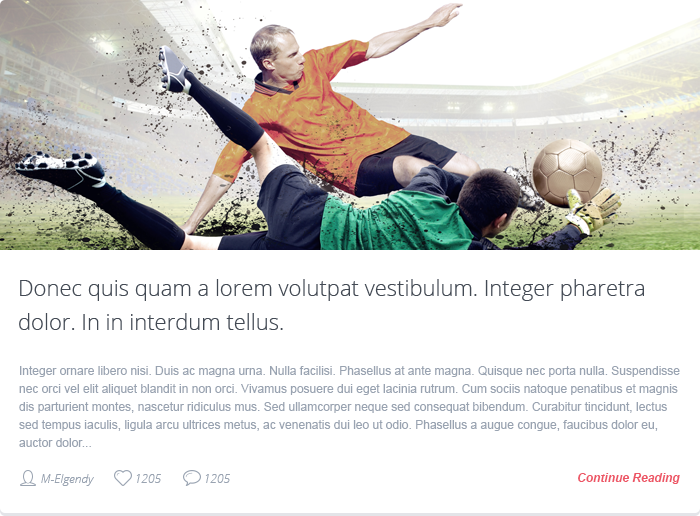
<style>
.page{position:relative;width:700px;height:516px;background:#ffffff}
.page>*{position:absolute;margin:0}
.t1{font:22px/34px "OpenSans-Light";color:#434a54}
.t2{font:12px/18px "ArialMT";color:#99a3b1}
.t3{font:12px "Arial-BoldItalicMT";color:#ed5565}
.t4{font:12px "OpenSansLight-Italic";color:#99a3b1}
</style>
<div class="page">
<p class="t1" style="left:19px;top:279px;width:625px;height:51px">Donec quis quam a lorem volutpat vestibulum. Integer pharetra dolor. In in interdum tellus.</p>
<p class="t2" style="left:19px;top:366px;width:661px;height:81px">Integer ornare libero nisi. Duis ac magna urna. Nulla facilisi. Phasellus at ante magna. Quisque nec porta nulla. Suspendisse nec orci vel elit aliquet blandit in non orci. Vivamus posuere dui eget lacinia rutrum. Cum sociis natoque penatibus et magnis dis parturient montes, nascetur ridiculus mus. Sed ullamcorper neque sed consequat bibendum. Curabitur tincidunt, lectus sed tempus iaculis, ligula arcu ultrices metus, ac venenatis dui leo ut odio. Phasellus a augue congue, faucibus dolor eu, auctor dolor...</p>
<p class="t3" style="left:578px;top:473px;width:102px;height:11px">Continue Reading</p>
<p class="t4" style="left:41px;top:474px;width:53px;height:12px">M-Elgendy</p>
<p class="t4" style="left:136px;top:474px;width:25px;height:9px">1205</p>
<p class="t4" style="left:205px;top:474px;width:25px;height:9px">1205</p>
</div>
